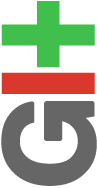
<style>
.page{position:relative;width:97px;height:188px;background:#ffffff}
.page>*{position:absolute;margin:0}
.t1{font:176.6px "Helvetica-Bold";letter-spacing:-0.025em}
.t2{font:121.6px "Helvetica-Bold";letter-spacing:-0.025em;color:#666666;font-weight:bold}
</style>
<div class="page">
<p class="t1" style="left:1px;top:1px;width:94px;height:93px">±</p>
<p class="t2" style="left:1px;top:101px;width:96px;height:85px;rotate:-90deg">G</p>
</div>
